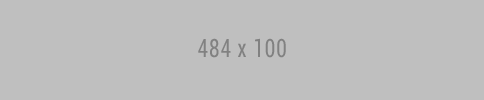
<style>
.page{position:relative;width:484px;height:100px;background:#bfbfbf}
.page>*{position:absolute;margin:0}
.t1{font:25px "Roboto-Condensed";letter-spacing:0.07em;color:#818181;scale:0.8 1}
</style>
<div class="page">
<p class="t1" style="left:198px;top:38px;width:88px;height:20px">484 x 100</p>
</div>
